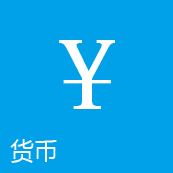
<style>
.page{position:relative;width:173px;height:173px;background:#00a1e9}
.page>*{position:absolute;margin:0}
.t1{font:24px "MicrosoftYaHei";color:#ffffff}
</style>
<div class="page">
<p class="t1" style="left:10px;top:139px;width:47px;height:24px">货币</p>
</div>
